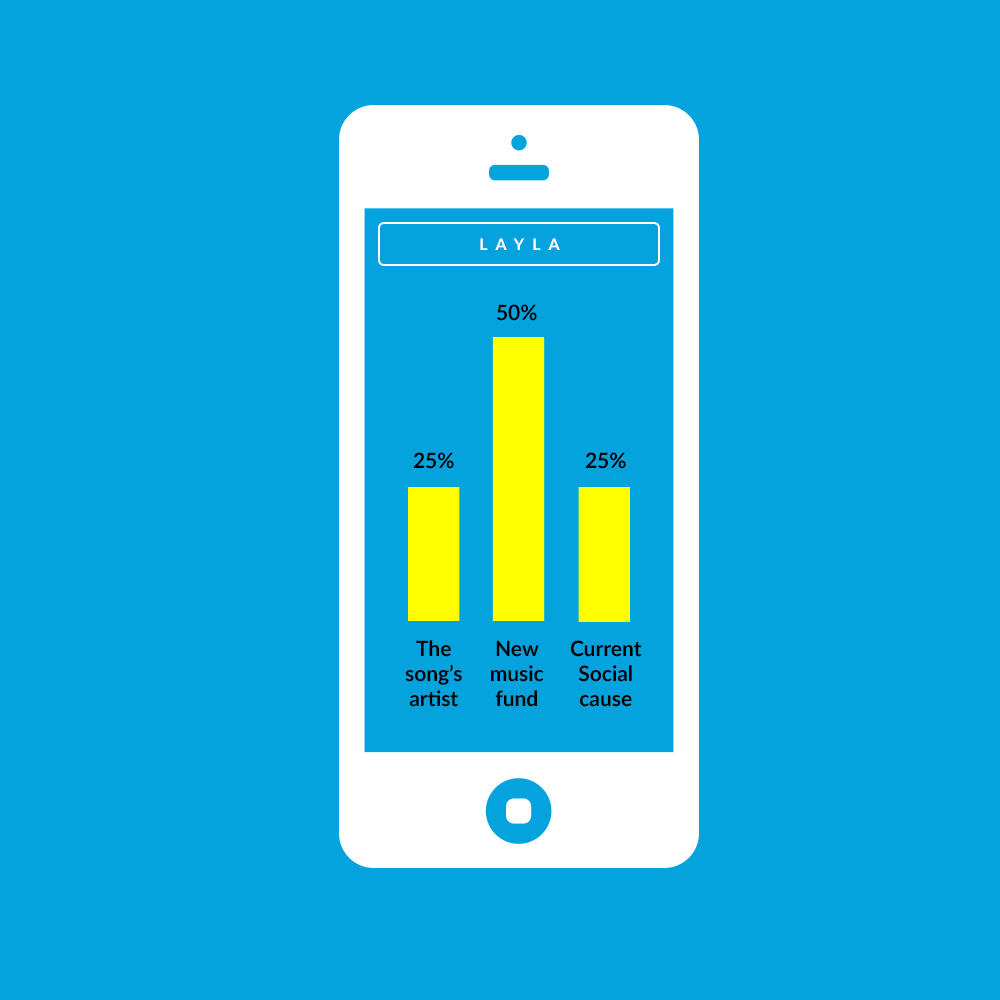
<style>
.page{position:relative;width:1000px;height:1000px;background:#05a3de}
.page>*{position:absolute;margin:0}
.t1{font:16px "Lato-Bold";letter-spacing:0.5em;color:#ffffff}
.t2{font:21px "Lato-Bold";color:#000000}
</style>
<div class="page">
<p class="t1" style="left:480px;top:238px;width:80px;height:12px">LAYLA</p>
<p class="t2" style="left:497px;top:304px;width:40px;height:17px">50%</p>
<p class="t2" style="left:413px;top:452px;width:41px;height:17px">25%</p>
<p class="t2" style="left:585px;top:452px;width:41px;height:17px">25%</p>
<p class="t2" style="left:405px;top:640px;width:57px;height:67px;text-align:center">The <br>song’s artist</p>
<p class="t2" style="left:491px;top:640px;width:53px;height:67px;text-align:center">New music fund</p>
<p class="t2" style="left:570px;top:640px;width:72px;height:67px;text-align:center">Current Social cause</p>
</div>
